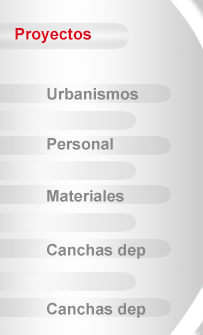
<style>
.page{position:relative;width:203px;height:335px}
.page>*{position:absolute;margin:0}
.t1{font:16px "Arial-BoldMT";color:#dc0a16}
.t2{font:16px "Arial-BoldMT";color:#888888}
</style>
<div class="page">
<p class="t1" style="left:15px;top:28px;width:76px;height:15px">Proyectos</p>
<p class="t2" style="left:47px;top:88px;width:91px;height:12px">Urbanismos</p>
<p class="t2" style="left:47px;top:138px;width:66px;height:12px">Personal</p>
<p class="t2" style="left:47px;top:190px;width:77px;height:12px">Materiales</p>
<p class="t2" style="left:47px;top:243px;width:99px;height:16px">Canchas dep</p>
<p class="t2" style="left:47px;top:302px;width:99px;height:16px">Canchas dep</p>
</div>
